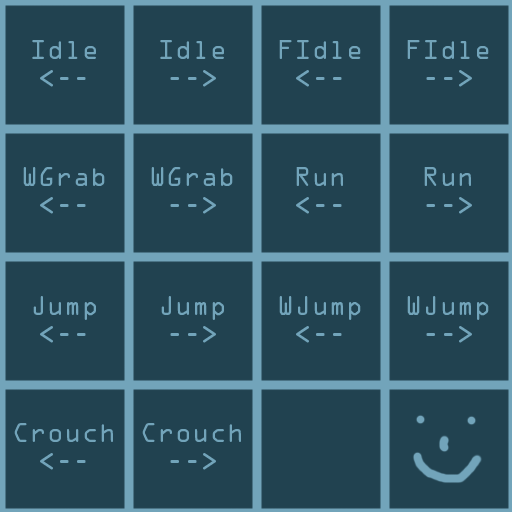
<style>
.page{position:relative;width:512px;height:512px;background:#214250}
.page>*{position:absolute;margin:0}
.t1{font:24px "OCRAStd";color:#72a4ba}
</style>
<div class="page">
<p class="t1" style="left:32px;top:40px;width:64px;height:47px;text-align:center">Idle<br>&lt;--</p>
<p class="t1" style="left:160px;top:40px;width:64px;height:47px;text-align:center">Idle<br>--&gt;</p>
<p class="t1" style="left:279px;top:40px;width:82px;height:47px;text-align:center">FIdle<br>&lt;--</p>
<p class="t1" style="left:407px;top:40px;width:82px;height:47px;text-align:center">FIdle<br>--&gt;</p>
<p class="t1" style="left:23px;top:167px;width:82px;height:47px;text-align:center">WGrab<br>&lt;--</p>
<p class="t1" style="left:151px;top:167px;width:82px;height:47px;text-align:center">WGrab<br>--&gt;</p>
<p class="t1" style="left:296px;top:167px;width:47px;height:47px;text-align:center">Run<br>&lt;--</p>
<p class="t1" style="left:424px;top:167px;width:48px;height:47px;text-align:center">Run<br>--&gt;</p>
<p class="t1" style="left:33px;top:296px;width:63px;height:47px;text-align:center">Jump<br>&lt;--</p>
<p class="t1" style="left:161px;top:296px;width:63px;height:47px;text-align:center">Jump<br>--&gt;</p>
<p class="t1" style="left:279px;top:296px;width:82px;height:47px;text-align:center">WJump<br>&lt;--</p>
<p class="t1" style="left:407px;top:296px;width:82px;height:47px;text-align:center">WJump<br>--&gt;</p>
<p class="t1" style="left:14px;top:423px;width:99px;height:47px;text-align:center">Crouch<br>&lt;--</p>
<p class="t1" style="left:142px;top:423px;width:99px;height:47px;text-align:center">Crouch<br>--&gt;</p>
</div>
